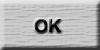
<style>
.page{position:relative;width:100px;height:50px}
.page>*{position:absolute;margin:0}
.t1{font:18px "Arial-BoldMT";color:#000000}
</style>
<div class="page">
<p class="t1" style="left:34px;top:18px;width:27px;height:15px">OK</p>
</div>
